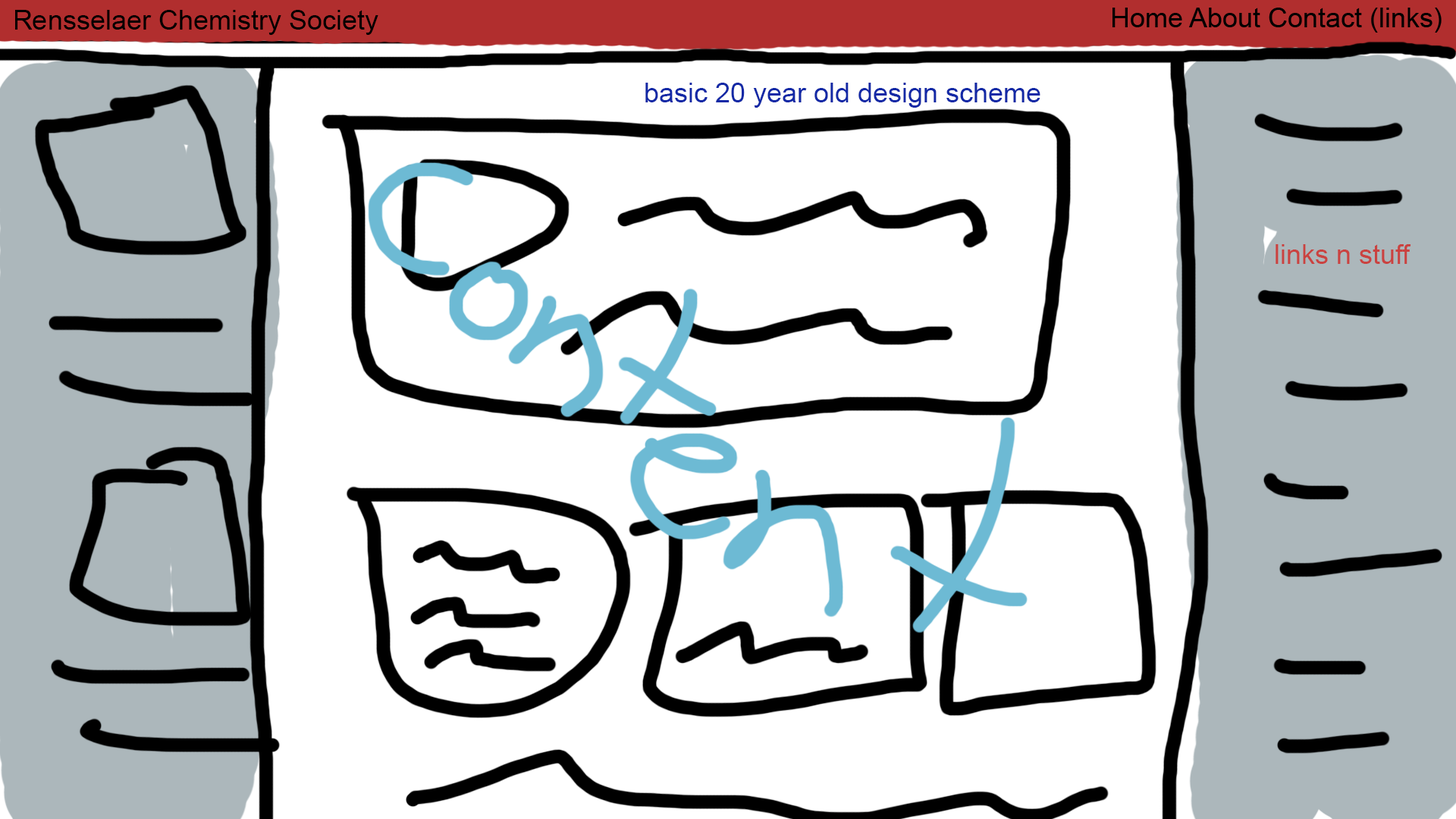
<style>
.page{position:relative;width:1456px;height:819px;background:#ffffff}
.page>*{position:absolute;margin:0}
.t1{font:27.3px "ArialMT";color:#000000}
.t2{font:27.3px "ArialMT";color:#1329a6}
.t3{font:27.3px "ArialMT";color:#ca4240}
</style>
<div class="page">
<p class="t1" style="left:15px;top:10px;width:363px;height:25px">Rensselaer Chemistry Society</p>
<p class="t2" style="left:645px;top:83px;width:395px;height:25px">basic 20 year old design scheme</p>
<p class="t3" style="left:1275px;top:244px;width:136px;height:20px">links n stuff</p>
</div>
